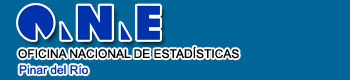
<style>
.page{position:relative;width:350px;height:80px;background:#006699}
.page>*{position:absolute;margin:0}
.t1{font:12px "ArialMT";color:#000000}
.t2{font:12px "ArialMT";color:#0033ab}
</style>
<div class="page">
<p class="t1" style="left:18px;top:47px;width:221px;height:12px">OFICINA NACIONAL DE ESTADÍSTICAS</p>
<p class="t2" style="left:19px;top:65px;width:69px;height:10px">Pinar del Río</p>
</div>
